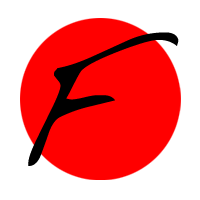
<style>
.page{position:relative;width:200px;height:200px;background:#ffffff}
.page>*{position:absolute;margin:0}
.t1{font:172.4px "Handwriting-Dakota";letter-spacing:0.2em;color:#000000;scale:0.89 1}
</style>
<div class="page">
<p class="t1" style="left:28px;top:32px;width:151px;height:134px">F</p>
</div>
